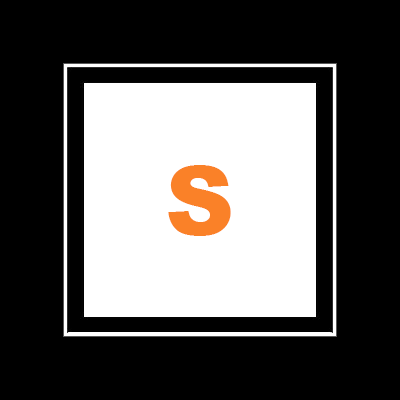
<style>
.page{position:relative;width:400px;height:400px;background:#000000}
.page>*{position:absolute;margin:0}
.t1{font:96px "Arial-Black";color:#fa8128}
</style>
<div class="page">
<p class="t1" style="left:168px;top:165px;width:63px;height:71px">S</p>
</div>
